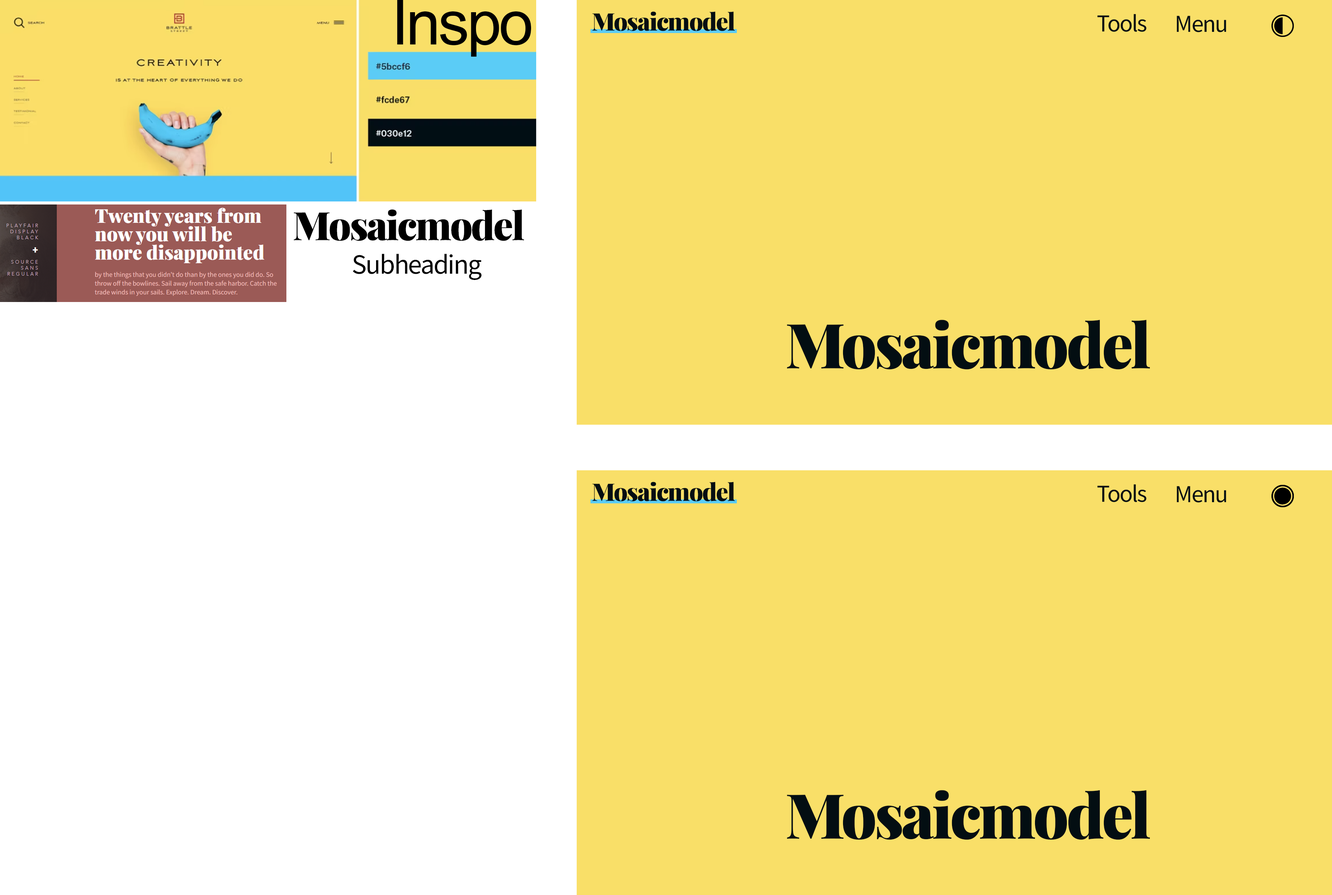
<style>
.page{position:relative;width:1332px;height:895px;background:#f9df68}
.page>*{position:absolute;margin:0}
.t1{font:62.2px "ArialMT";letter-spacing:-0.04em;color:#000000}
.t2{font:24.4px "PlayfairDisplayRoman-Black";letter-spacing:-0.04em;color:#030e12}
.t3{font:24.4px "SourceSansPro-Regular";letter-spacing:-0.04em;color:#030e12}
.t4{font:39.3px "PlayfairDisplayRoman-Black";letter-spacing:-0.04em;color:#000000}
.t5{font:27.9px "SourceSansPro-Regular";letter-spacing:-0.04em;color:#000000}
.t6{font:62.2px "PlayfairDisplayRoman-Black";letter-spacing:-0.04em;color:#030e12}
</style>
<div class="page">
<p class="t1" style="left:397px;top:0px;width:134px;height:57px">Inspo</p>
<p class="t2" style="left:592px;top:11px;width:143px;height:20px">Mosaicmodel</p>
<p class="t3" style="left:1097px;top:14px;width:49px;height:18px">Tools</p>
<p class="t3" style="left:1177px;top:16px;width:49px;height:16px">Menu</p>
<p class="t4" style="left:294px;top:209px;width:230px;height:32px">Mosaicmodel</p>
<p class="t5" style="left:353px;top:254px;width:128px;height:26px">Subheading</p>
<p class="t6" style="left:787px;top:320px;width:363px;height:50px">Mosaicmodel</p>
<p class="t2" style="left:592px;top:482px;width:143px;height:20px">Mosaicmodel</p>
<p class="t3" style="left:1097px;top:484px;width:49px;height:18px">Tools</p>
<p class="t3" style="left:1177px;top:486px;width:49px;height:17px">Menu</p>
<p class="t6" style="left:787px;top:790px;width:363px;height:50px">Mosaicmodel</p>
</div>
